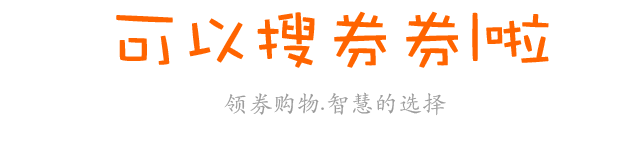
<style>
.page{position:relative;width:640px;height:166px;background:#ffffff}
.page>*{position:absolute;margin:0}
.t1{font:72px "DFWaWaSC-W5";color:#ff6400}
.t2{font:24px "STKaiti";color:#9b9b9b}
</style>
<div class="page">
<p class="t1" style="left:116px;top:11px;width:433px;height:57px">可以搜券券l啦</p>
<p class="t2" style="left:224px;top:92px;width:222px;height:24px">领券购物.智慧的选择</p>
</div>
